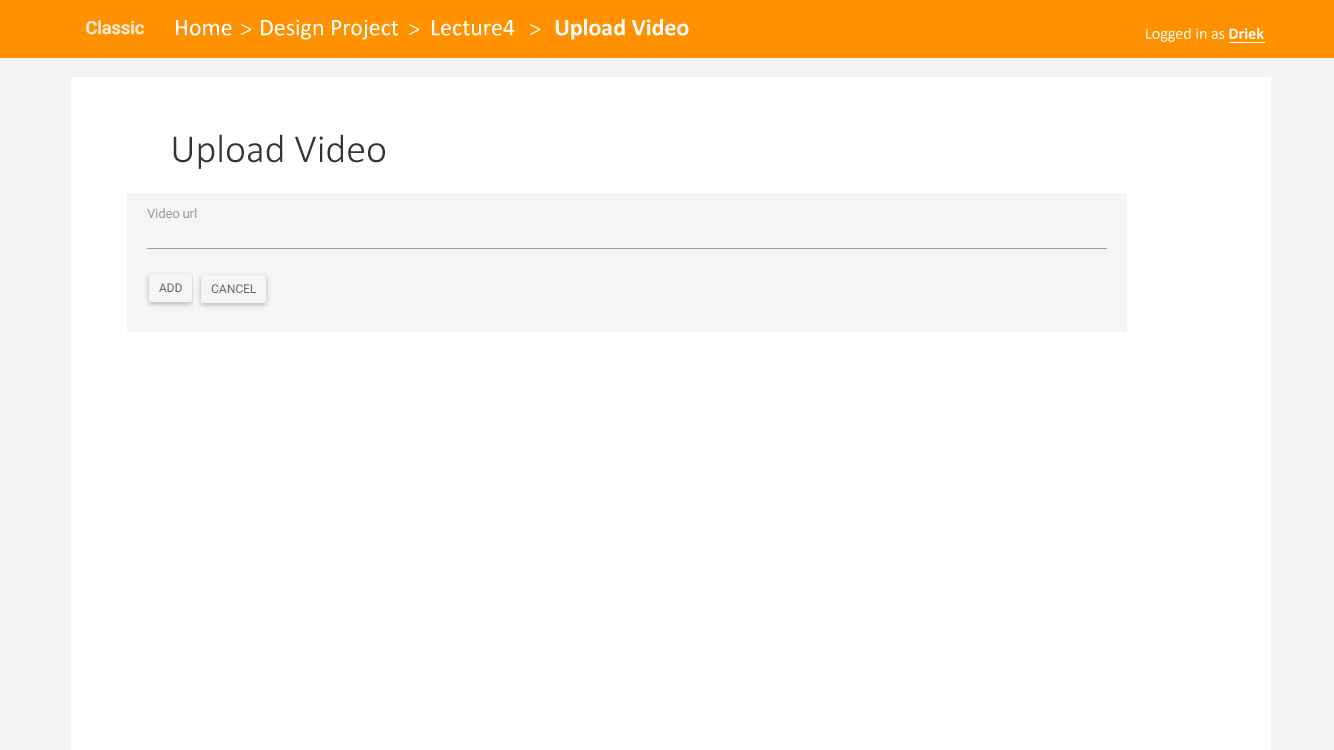
<style>
.page{position:relative;width:1334px;height:750px;background:#ffffff}
.page>*{position:absolute;margin:0}
.t1{font:24px "Calibri";color:#ffffff}
.t2{font:24px "Calibri-Light";color:#ffffff}
.t3{font:24px "Calibri-Bold";color:#ffffff}
.t4{font:16px "Calibri";color:#ffffff}
.t5{font:16px "Calibri-Bold";color:#ffffff}
.t6{font:40px "Calibri-Light";color:#333333}
</style>
<div class="page">
<p class="t1" style="left:176px;top:20px;width:56px;height:16px">Home</p>
<p class="t2" style="left:241px;top:24px;width:11px;height:11px">&gt;</p>
<p class="t1" style="left:261px;top:19px;width:137px;height:21px">Design Project</p>
<p class="t2" style="left:409px;top:24px;width:11px;height:11px">&gt;</p>
<p class="t1" style="left:432px;top:20px;width:83px;height:16px">Lecture4</p>
<p class="t2" style="left:530px;top:24px;width:11px;height:11px">&gt;</p>
<p class="t3" style="left:555px;top:19px;width:134px;height:21px">Upload Video</p>
<p class="t4" style="left:1146px;top:28px;width:118px;height:14px">Logged in as <span class="t5">Driek</span></p>
<p class="t6" style="left:173px;top:134px;width:212px;height:35px">Upload Video</p>
</div>
